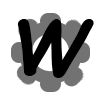
<style>
.page{position:relative;width:100px;height:100px;background:#ffffff}
.page>*{position:absolute;margin:0}
.t1{font:76px "ComicSansMS-BoldItalic";color:#000000}
</style>
<div class="page">
<p class="t1" style="left:17px;top:19px;width:77px;height:59px">W</p>
</div>
